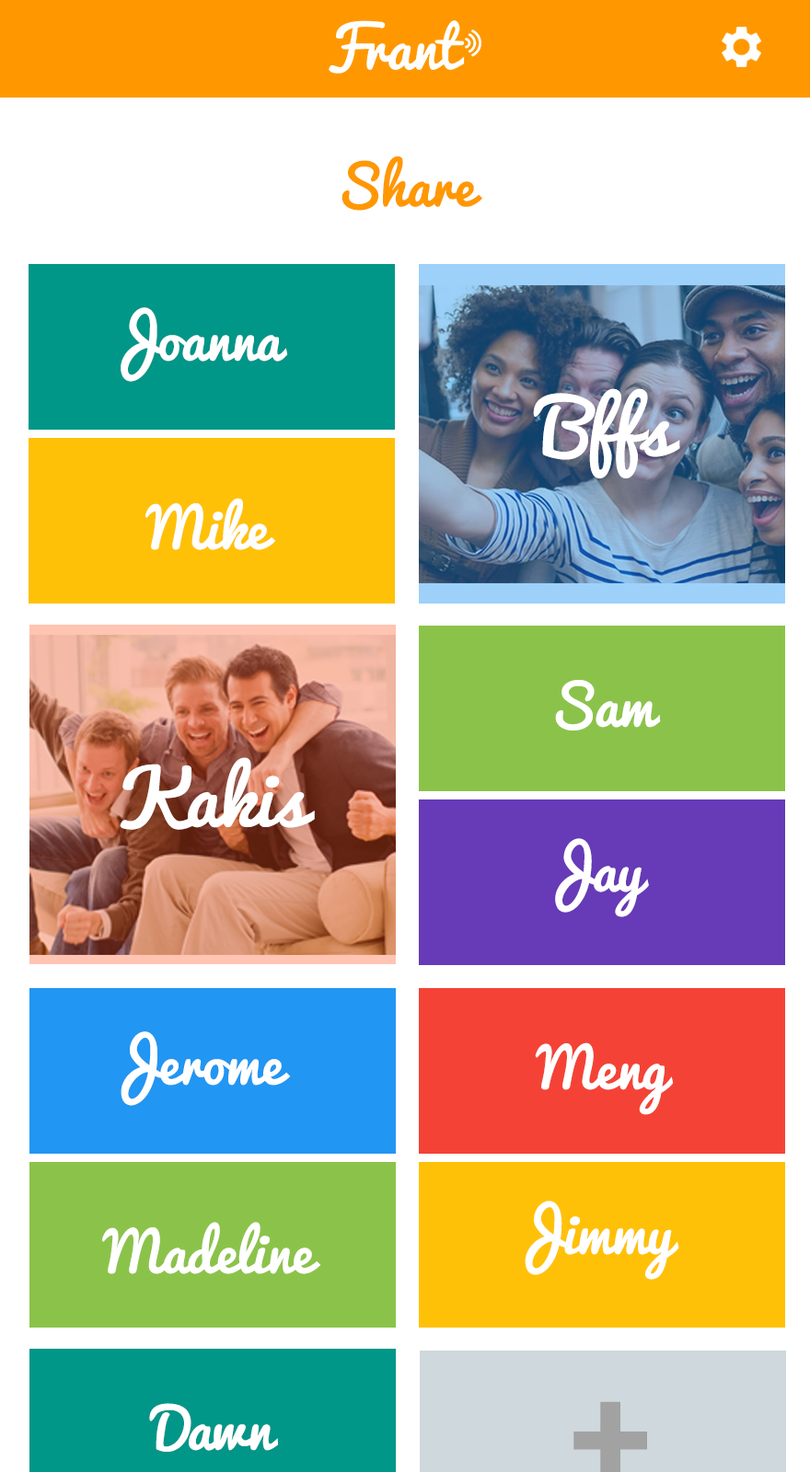
<style>
.page{position:relative;width:810px;height:1472px;background:#ffffff}
.page>*{position:absolute;margin:0}
.t1{font:53.7px "Pacifico-Regular";color:#ff9800}
.t2{font:54.8px "Pacifico-Regular";color:#ffffff}
.t3{font:74.4px "Pacifico-Regular";color:#ffffff}
</style>
<div class="page">
<p class="t1" style="left:341px;top:156px;width:141px;height:55px">Share</p>
<p class="t2" style="left:121px;top:307px;width:167px;height:75px">Joanna</p>
<p class="t3" style="left:533px;top:388px;width:147px;height:91px">Bffs</p>
<p class="t2" style="left:145px;top:498px;width:130px;height:52px">Mike</p>
<p class="t2" style="left:555px;top:680px;width:106px;height:51px">Sam</p>
<p class="t3" style="left:120px;top:757px;width:195px;height:73px">Kakis</p>
<p class="t2" style="left:555px;top:838px;width:94px;height:80px">Jay</p>
<p class="t2" style="left:121px;top:1032px;width:170px;height:74px">Jerome</p>
<p class="t2" style="left:535px;top:1043px;width:139px;height:72px">Meng</p>
<p class="t2" style="left:525px;top:1201px;width:154px;height:79px">Jimmy</p>
<p class="t2" style="left:102px;top:1222px;width:219px;height:53px">Madeline</p>
<p class="t2" style="left:149px;top:1403px;width:130px;height:49px">Dawn</p>
</div>
